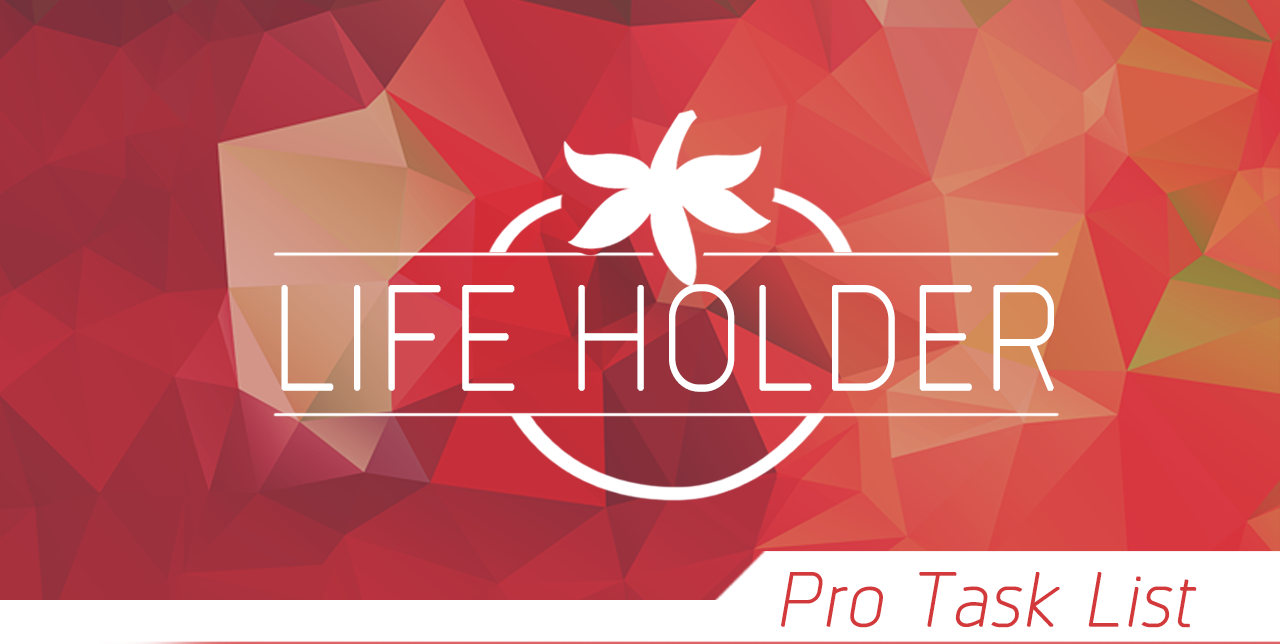
<style>
.page{position:relative;width:1280px;height:644px}
.page>*{position:absolute;margin:0}
.t1{font:144.8px "Norpeth-Light";color:#ffffff;font-weight:bold;scale:0.9 1}
.t2{font:74.9px "Norpeth-Light";color:#d3393b;font-weight:bold;font-style:italic}
</style>
<div class="page">
<p class="t1" style="left:281px;top:284px;width:773px;height:108px">LIFE HOLDER</p>
<p class="t2" style="left:781px;top:572px;width:416px;height:56px">Pro Task List</p>
</div>
